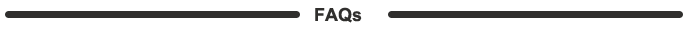
<style>
.page{position:relative;width:700px;height:30px;background:#ffffff}
.page>*{position:absolute;margin:0}
.t1{font:18px "Arial-BoldMT";color:#302f2d}
</style>
<div class="page">
<p class="t1" style="left:315px;top:7px;width:47px;height:16px">FAQs</p>
</div>
